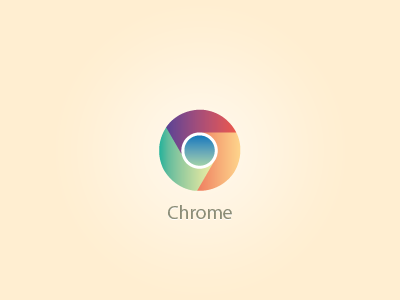
<style>
.page{position:relative;width:400px;height:300px;background:#ffeed1}
.page>*{position:absolute;margin:0}
.t1{font:19.4px "MyriadPro-Regular";color:#8c8d77}
</style>
<div class="page">
<p class="t1" style="left:168px;top:205px;width:64px;height:14px">Chrome</p>
</div>
